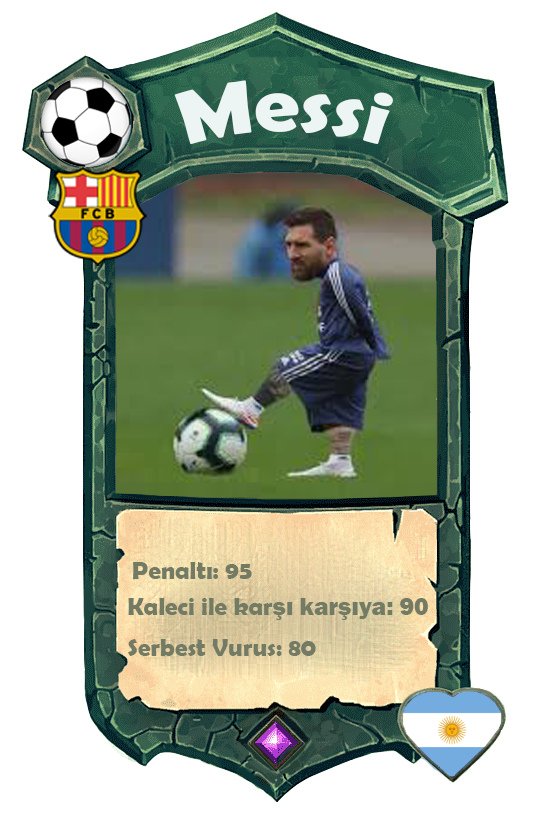
<style>
.page{position:relative;width:558px;height:814px;background:#ffffff}
.page>*{position:absolute;margin:0}
.t1{font:75.7px "BerlinSansFBDemi-Bold";color:#ecf4f4;scale:1.06 1}
.t2{font:25px "BerlinSansFBDemi-Bold";color:#747b65}
.t3{font:25px "FranklinGothic-Heavy";color:#747b65}
</style>
<div class="page">
<p class="t1" style="left:174px;top:80px;width:219px;height:64px">Messi</p>
<p class="t2" style="left:133px;top:562px;width:119px;height:17px">Penaltı: 95</p>
<p class="t2" style="left:128px;top:598px;width:300px;height:22px">Kaleci ile kar<span class="t3">şı karşıya: 90</span></p>
<p class="t2" style="left:128px;top:639px;width:188px;height:17px">Serbest Vurus: 80</p>
</div>
